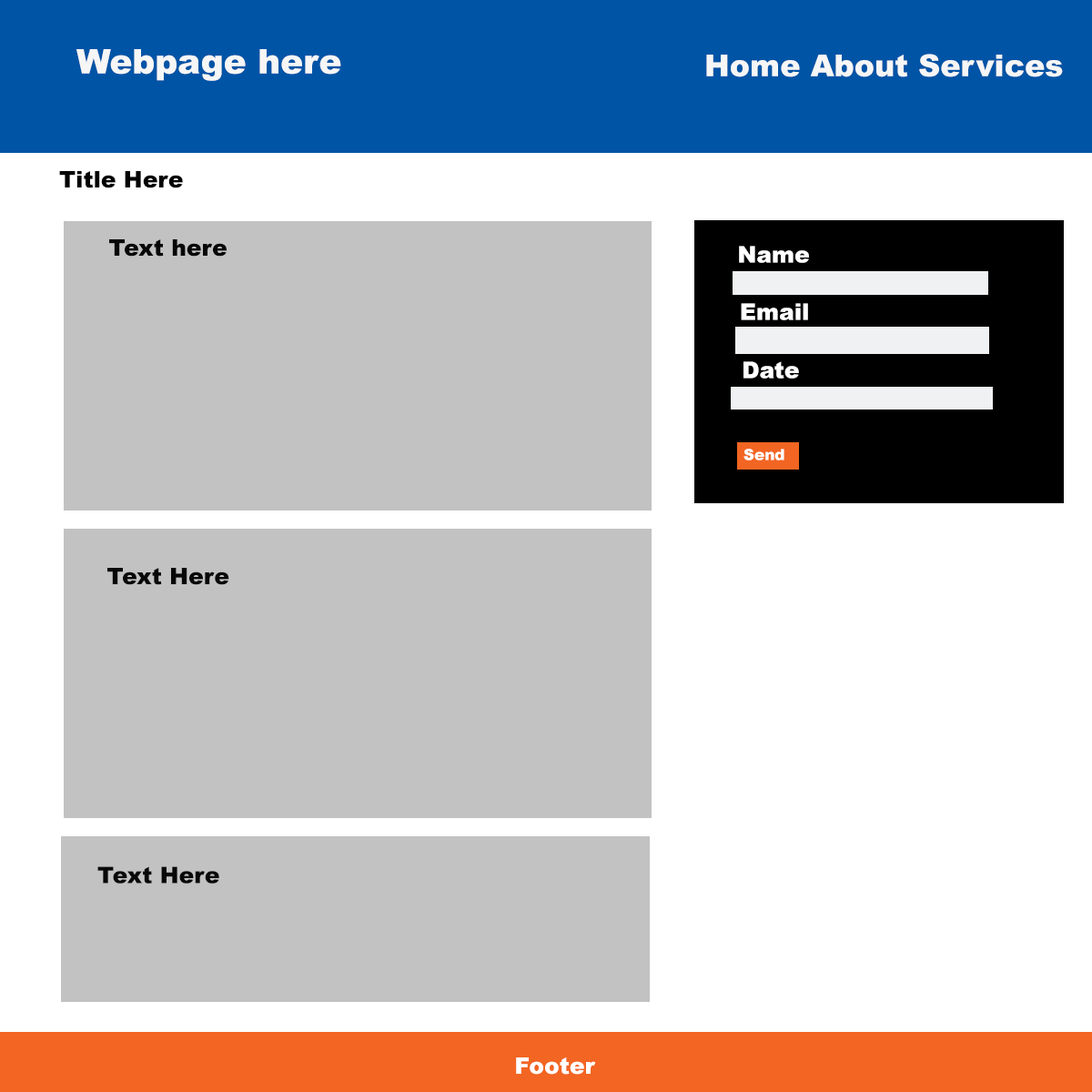
<style>
.page{position:relative;width:1092px;height:1092px;background:#c2c2c2}
.page>*{position:absolute;margin:0}
.t1{font:34.1px "Arial-Black";color:#f6f6f6}
.t2{font:30.3px "Arial-Black";color:#f6f6f6}
.t3{font:22.7px "Arial-Black";color:#030303}
.t4{font:22.7px "Arial-Black";color:#080808}
.t5{font:22.7px "Arial-Black";color:#ffffff}
.t6{font:15.2px "Arial-Black";color:#ffffff}
</style>
<div class="page">
<p class="t1" style="left:76px;top:49px;width:265px;height:32px">Webpage here</p>
<p class="t2" style="left:706px;top:54px;width:357px;height:23px">Home About Services</p>
<p class="t3" style="left:59px;top:171px;width:124px;height:17px">Title Here</p>
<p class="t4" style="left:109px;top:239px;width:118px;height:18px">Text here</p>
<p class="t5" style="left:739px;top:246px;width:70px;height:17px">Name</p>
<p class="t5" style="left:741px;top:303px;width:67px;height:17px">Email</p>
<p class="t5" style="left:743px;top:361px;width:56px;height:18px">Date</p>
<p class="t6" style="left:743px;top:449px;width:41px;height:11px">Send</p>
<p class="t4" style="left:107px;top:568px;width:122px;height:17px">Text Here</p>
<p class="t4" style="left:97px;top:866px;width:122px;height:18px">Text Here</p>
<p class="t5" style="left:516px;top:1057px;width:80px;height:18px">Footer</p>
</div>
